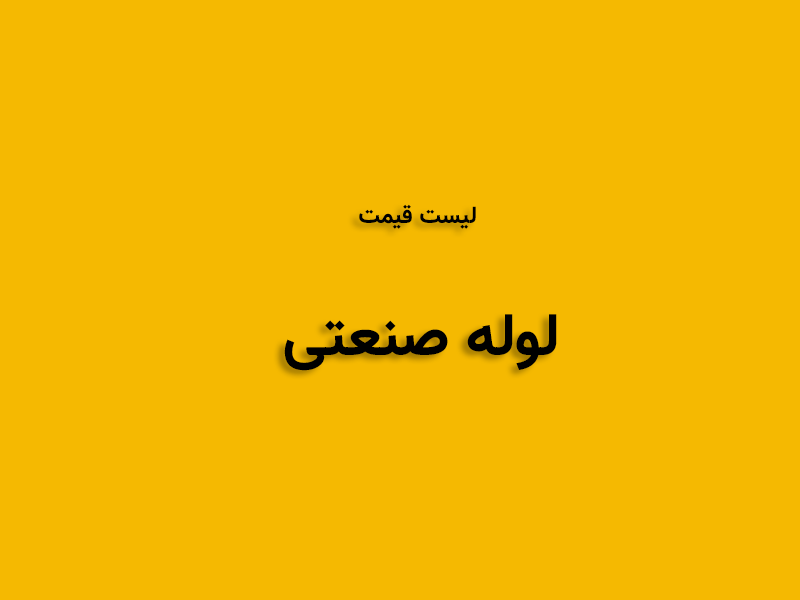
<style>
.page{position:relative;width:800px;height:600px;background:#f5b901}
.page>*{position:absolute;margin:0}
.t1{font:60px "Vazir-Bold";color:#000000}
.t2{font:24px "Vazir-Bold";color:#000000}
</style>
<div class="page">
<p class="t1" style="left:284px;top:204px;width:273px;height:167px;text-align:center"><span class="t2">لیست قیمت <br><br></span>لوله صنعتی</p>
</div>
